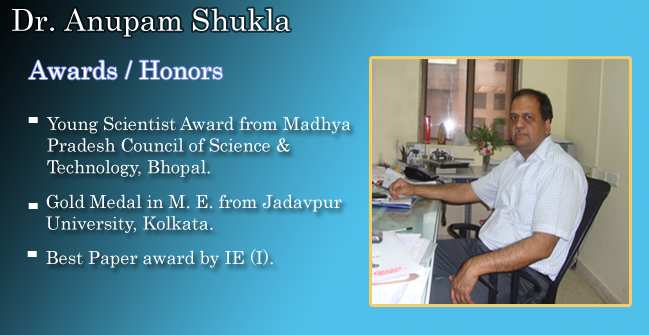
<style>
.page{position:relative;width:649px;height:335px}
.page>*{position:absolute;margin:0}
.t1{font:30px "Century";color:#ffffff}
.t2{font:25.2px "Century";color:#ffffff}
.t3{font:18px "Century";color:#ffffff}
</style>
<div class="page">
<p class="t1" style="left:12px;top:8px;width:279px;height:29px">Dr. Anupam Shukla</p>
<p class="t2" style="left:28px;top:60px;width:195px;height:20px">Awards / Honors</p>
<p class="t3" style="left:46px;top:116px;width:305px;height:61px">Young Scientist Award from Madhya <br>Pradesh Council of Science &amp; <br>Technology, Bhopal.</p>
<p class="t3" style="left:46px;top:194px;width:296px;height:39px">Gold Medal in M. E. from Jadavpur <br>University, Kolkata.</p>
<p class="t3" style="left:46px;top:248px;width:227px;height:20px">Best Paper award by IE (I).</p>
</div>
